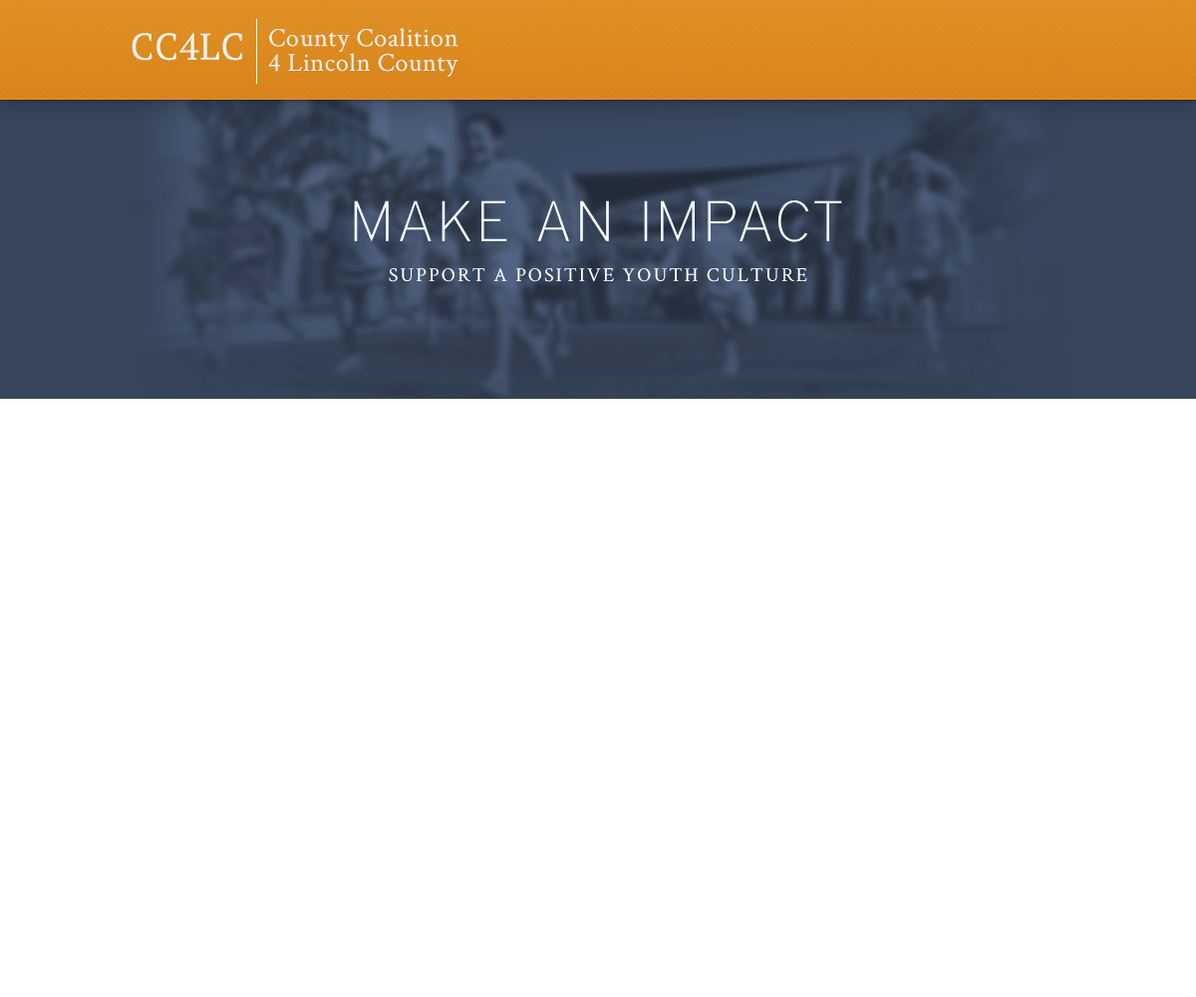
<style>
.page{position:relative;width:1196px;height:997px;background:#ffffff}
.page>*{position:absolute;margin:0}
.t1{font:26.3px/24.8px "Crimson-Roman";letter-spacing:0.02em;color:#f8f3ed}
.t2{font:26px/24.8px "Crimson-Roman";letter-spacing:0.02em;color:#f8f3ed}
.t3{font:36.9px "PTSerif-Regular";letter-spacing:0.02em;color:#f8f3ed}
.t4{font:56.8px "District-Thin";letter-spacing:0.1em;color:#ffffff;text-transform:uppercase}
.t5{font:19.9px "Crimson-Roman";letter-spacing:0.1em;color:#ffffff;text-transform:uppercase}
</style>
<div class="page">
<p class="t1" style="left:268px;top:28px;width:191px;height:49px">County Coalition<br><span class="t2">4 Lincoln County</span></p>
<p class="t3" style="left:132px;top:33px;width:110px;height:28px">CC4LC</p>
<p class="t4" style="left:354px;top:200px;width:488px;height:42px">make an Impact</p>
<p class="t5" style="left:389px;top:268px;width:418px;height:14px">support a positive youth culture</p>
</div>
